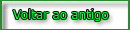
<style>
.page{position:relative;width:130px;height:30px}
.page>*{position:absolute;margin:0}
.t1{font:12px "Verdana";color:#00fe30}
</style>
<div class="page">
<p class="t1" style="left:13px;top:9px;width:96px;height:12px">Voltar ao antigo</p>
</div>
